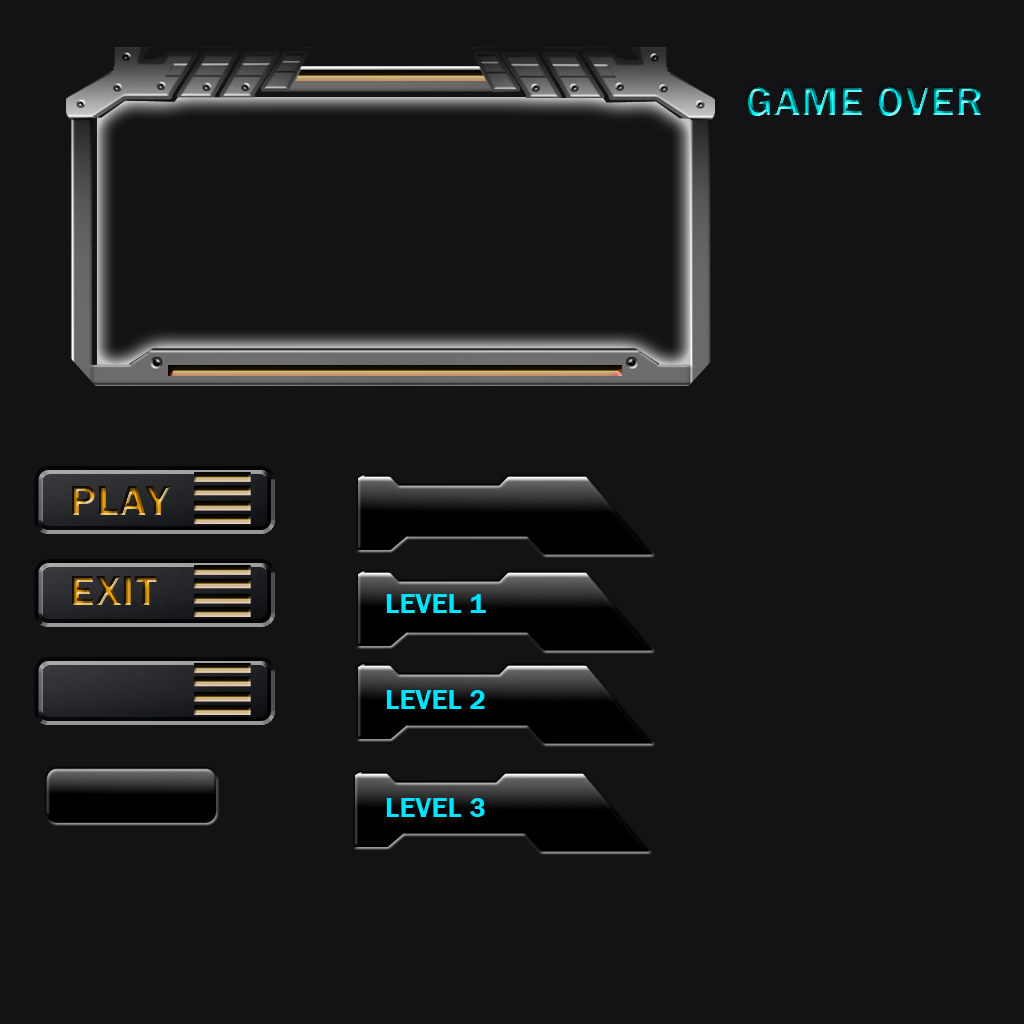
<style>
.page{position:relative;width:1024px;height:1024px;background:#131315}
.page>*{position:absolute;margin:0}
.t1{font:44px "FranklinGothic-Demi";letter-spacing:0.01em}
.t2{font:27.9px "FranklinGothic-Demi";letter-spacing:0.01em;color:#00e4ff}
</style>
<div class="page">
<p class="t1" style="left:72px;top:486px;width:99px;height:29px">PLAY</p>
<p class="t1" style="left:72px;top:576px;width:85px;height:29px">EXIT</p>
<p class="t2" style="left:386px;top:594px;width:100px;height:19px">LEVEL 1</p>
<p class="t2" style="left:386px;top:690px;width:99px;height:19px">LEVEL 2</p>
<p class="t2" style="left:386px;top:798px;width:99px;height:19px">LEVEL 3</p>
</div>
